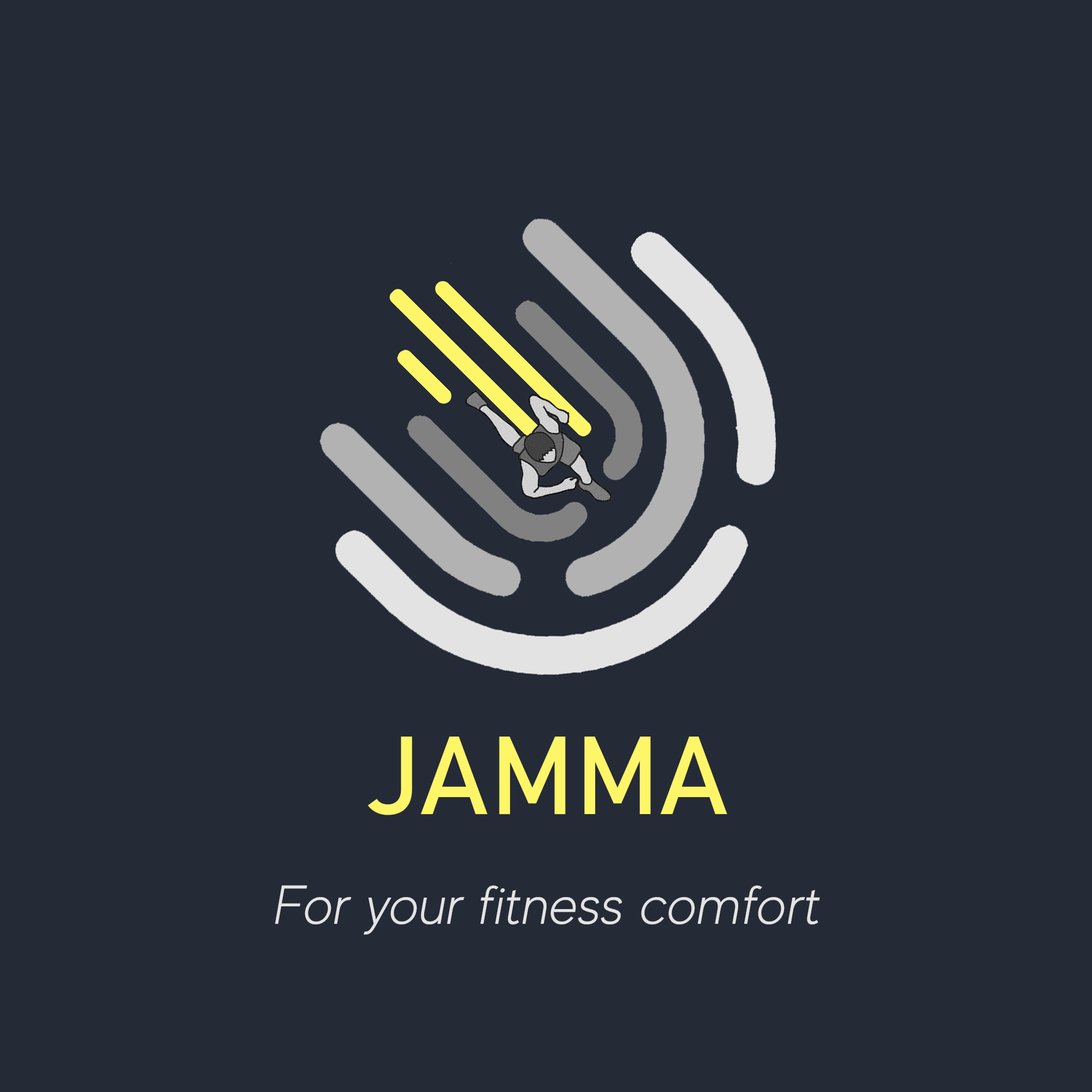
<style>
.page{position:relative;width:1092px;height:1092px;background:#252a37}
.page>*{position:absolute;margin:0}
.t1{font:109.2px "Bahnschrift";color:#fef668;font-style:italic}
.t2{font:54.6px "MADEEvolveSans-Light";color:#e3e3e3;font-style:italic}
</style>
<div class="page">
<p class="t1" style="left:367px;top:737px;width:360px;height:78px">JAMMA</p>
<p class="t2" style="left:275px;top:885px;width:545px;height:50px">For your fitness comfort</p>
</div>
